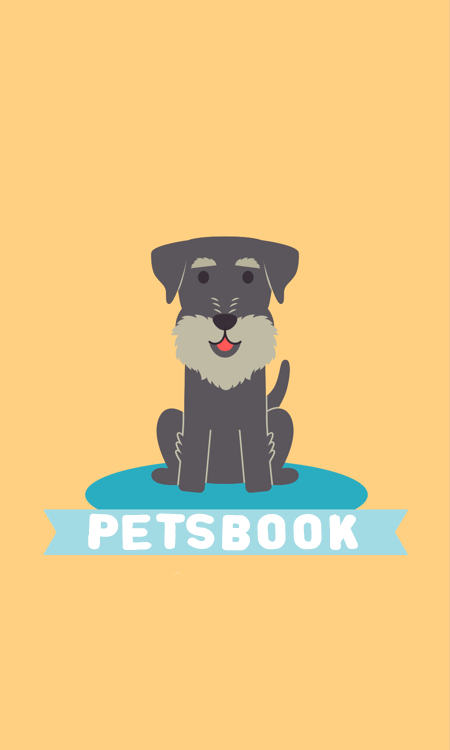
<style>
.page{position:relative;width:450px;height:750px;background:#ffd081}
.page>*{position:absolute;margin:0}
.t1{font:48px "AlphaFridgeMagnets";letter-spacing:0.12em;color:#ffffff;scale:1.09 1}
</style>
<div class="page">
<p class="t1" style="left:88px;top:513px;width:270px;height:38px">PETSBOOK</p>
</div>
